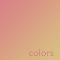
<style>
.page{position:relative;width:60px;height:60px}
.page>*{position:absolute;margin:0}
.t1{font:9.4px "Avenir-Roman";color:#d98286}
</style>
<div class="page">
<p class="t1" style="left:29px;top:48px;width:25px;height:8px">colors</p>
</div>
